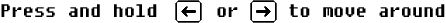
<style>
.page{position:relative;width:446px;height:23px;background:#ffffff}
.page>*{position:absolute;margin:0}
.t1{font:18px "Fixedsys";color:#000000}
</style>
<div class="page">
<p class="t1" style="left:1px;top:4px;width:444px;height:13px">Press and hold  or  to move around</p>
</div>
